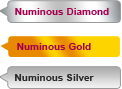
<style>
.page{position:relative;width:122px;height:89px;background:#ffffff}
.page>*{position:absolute;margin:0}
.t1{font:10px "Arial-BoldMT";color:#a50050}
.t2{font:10px "Arial-BoldMT";color:#282828}
</style>
<div class="page">
<p class="t1" style="left:15px;top:8px;width:94px;height:7px">Numinous Diamond</p>
<p class="t1" style="left:17px;top:43px;width:74px;height:7px">Numinous Gold</p>
<p class="t2" style="left:15px;top:74px;width:79px;height:7px">Numinous Silver</p>
</div>
